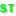
<style>
.page{position:relative;width:16px;height:16px;background:#ffffff}
.page>*{position:absolute;margin:0}
.t1{font:10.7px "Arial-BoldMT";letter-spacing:0.05em;color:#00ff00}
</style>
<div class="page">
<p class="t1" style="left:0px;top:4px;width:7px;height:8px">S</p>
<p class="t1" style="left:7px;top:4px;width:8px;height:8px">T</p>
</div>
